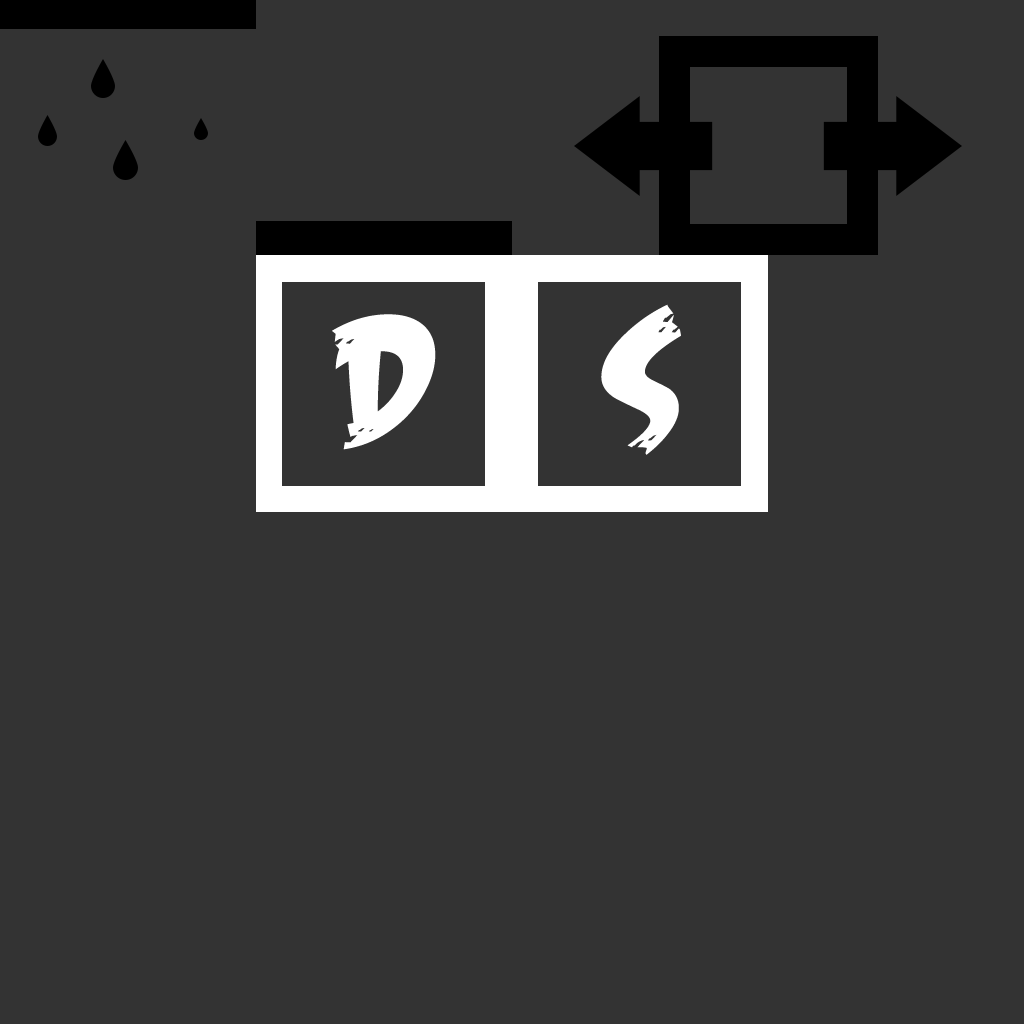
<style>
.page{position:relative;width:1024px;height:1024px;background:#333333}
.page>*{position:absolute;margin:0}
.t1{font:187px "FeastofFleshBB";color:#ffffff}
</style>
<div class="page">
<p class="t1" style="left:601px;top:304px;width:80px;height:151px">S</p>
<p class="t1" style="left:332px;top:314px;width:104px;height:136px">D</p>
</div>
